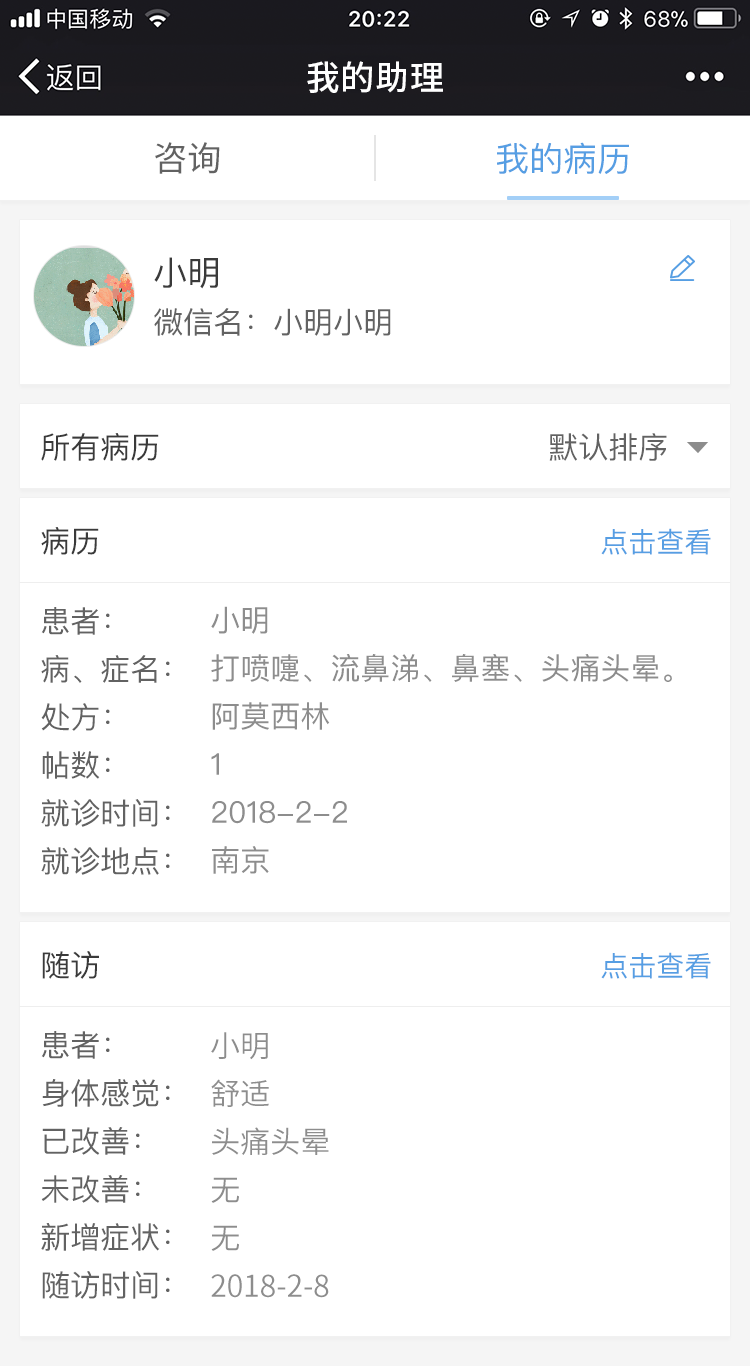
<style>
.page{position:relative;width:750px;height:1366px;background:#ffffff}
.page>*{position:absolute;margin:0}
.t1{font:34px "SourceHanSansCN-Medium";letter-spacing:0.02em;color:#ffffff}
.t2{font:34px "SourceHanSansCN-Regular";color:#626262}
.t3{font:34px "PingFangSC-Regular";color:#569ee3}
.t4{font:34px "PingFangSC-Regular";color:#3a3a3a}
.t5{font:30px "PingFangSC-Regular";color:#626262}
.t6{font:30px "PingFangSC-Regular";color:#3a3a3a}
.t7{font:28px "PingFangSC-Regular";color:#569ee3}
.t8{font:30px/48px "PingFangSC-Regular";color:#8d8d8d}
.t9{font:30px/48px "PingFangSC-Regular";color:#626262}
.t10{font:30px/48px "SourceHanSansCN-Normal";color:#8d8d8d}
</style>
<div class="page">
<p class="t1" style="left:307px;top:61px;width:136px;height:32px">我的助理</p>
<p class="t2" style="left:155px;top:142px;width:65px;height:32px">咨询</p>
<p class="t3" style="left:497px;top:142px;width:132px;height:32px">我的病历</p>
<p class="t4" style="left:154px;top:257px;width:64px;height:32px">小明</p>
<p class="t5" style="left:154px;top:308px;width:237px;height:28px">微信名：小明小明</p>
<p class="t6" style="left:41px;top:433px;width:118px;height:28px">所有病历</p>
<p class="t5" style="left:549px;top:433px;width:118px;height:28px">默认排序</p>
<p class="t6" style="left:41px;top:527px;width:58px;height:28px">病历</p>
<p class="t7" style="left:601px;top:528px;width:110px;height:27px">点击查看</p>
<p class="t8" style="left:211px;top:606px;width:461px;height:268px">小明<br>打喷嚏、流鼻涕、鼻塞、头痛头晕。<br>阿莫西林<br>1<br>2018-2-2<br>南京</p>
<p class="t9" style="left:41px;top:607px;width:129px;height:268px">患者：<br>病、症名：<br>处方：<br>帖数：<br>就诊时间：<br>就诊地点：</p>
<p class="t6" style="left:42px;top:951px;width:57px;height:28px">随访</p>
<p class="t7" style="left:601px;top:952px;width:110px;height:27px">点击查看</p>
<p class="t9" style="left:41px;top:1031px;width:129px;height:268px">患者：<br>身体感觉：<br>已改善：<br>未改善：<br>新增症状：<br>随访时间：</p>
<p class="t10" style="left:211px;top:1032px;width:118px;height:266px">小明<br>舒适<br>头痛头晕<br>无<br>无<br>2018-2-8</p>
</div>
